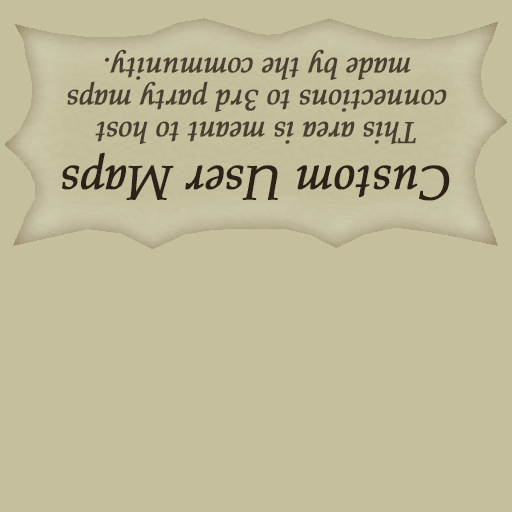
<style>
.page{position:relative;width:512px;height:512px;background:#c4c09d}
.page>*{position:absolute;margin:0}
.t1{font:30px/32px "PalatinoLinotype-Italic";letter-spacing:-0.01em;color:#493f30;font-weight:bold}
.t2{font:48px "PalatinoLinotype-Italic";letter-spacing:-0.01em;color:#2b2317;font-weight:bold}
</style>
<div class="page">
<p class="t1" style="left:67px;top:49px;width:380px;height:95px;text-align:center;rotate:180deg">This area is meant to host<br>connections to 3rd party maps<br>made by the community.</p>
<p class="t2" style="left:62px;top:152px;width:388px;height:49px;rotate:180deg">Custom User Maps</p>
</div>
